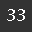
<style>
.page{position:relative;width:32px;height:32px;background:#333333}
.page>*{position:absolute;margin:0}
.t1{font:17.8px "MyriadPro-Regular";color:#ffffff;scale:1.12 1}
</style>
<div class="page">
<p class="t1" style="left:7px;top:9px;width:18px;height:12px">33</p>
</div>
